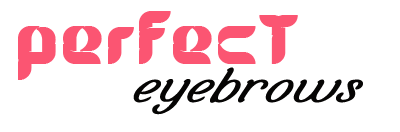
<style>
.page{position:relative;width:400px;height:132px;background:#ffffff}
.page>*{position:absolute;margin:0}
.t1{font:71px "Alice";color:#fb5572;font-weight:bold}
.t2{font:52px "SelamatHariRaya";letter-spacing:0.025em;color:#060504;font-weight:bold;font-style:italic}
</style>
<div class="page">
<p class="t1" style="left:18px;top:11px;width:280px;height:69px">perfect</p>
<p class="t2" style="left:133px;top:67px;width:230px;height:48px">eyebrows</p>
</div>
